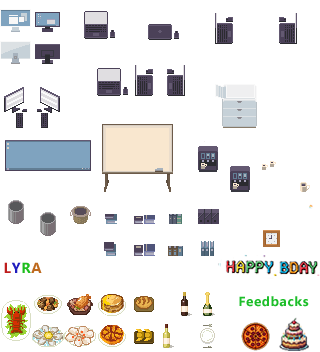
<style>
.page{position:relative;width:320px;height:352px;background:#ffffff}
.page>*{position:absolute;margin:0}
.t1{font:14.5px "MicrosoftTaiLe-Bold";letter-spacing:0.05em;color:#be1d1d}
.t2{font:14.5px "MicrosoftTaiLe-Bold";letter-spacing:0.05em;color:#201dbe}
.t3{font:14.5px "MicrosoftTaiLe-Bold";letter-spacing:0.05em;color:#1dbe1d}
.t4{font:14.5px "MicrosoftTaiLe-Bold";letter-spacing:0.05em;color:#be691d}
.t5{font:13.3px "MicrosoftTaiLe-Bold";letter-spacing:0.05em;color:#1dbe2a}
</style>
<div class="page">
<p class="t1" style="left:4px;top:262px;width:38px;height:11px">L<span class="t2">Y</span><span class="t3">R</span><span class="t4">A</span></p>
<p class="t5" style="left:239px;top:296px;width:70px;height:11px">Feedbacks</p>
</div>
